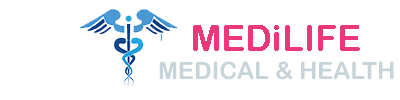
<style>
.page{position:relative;width:400px;height:100px;background:#ffffff}
.page>*{position:absolute;margin:0}
.t1{font:36px "ArialRoundedMTBold";color:#ea387b}
.t2{font:24px "ArialRoundedMTBold";color:#c7d4d9}
</style>
<div class="page">
<p class="t1" style="left:193px;top:25px;width:167px;height:26px">MEDiLIFE</p>
<p class="t2" style="left:159px;top:61px;width:235px;height:19px">MEDICAL &amp; HEALTH</p>
</div>
